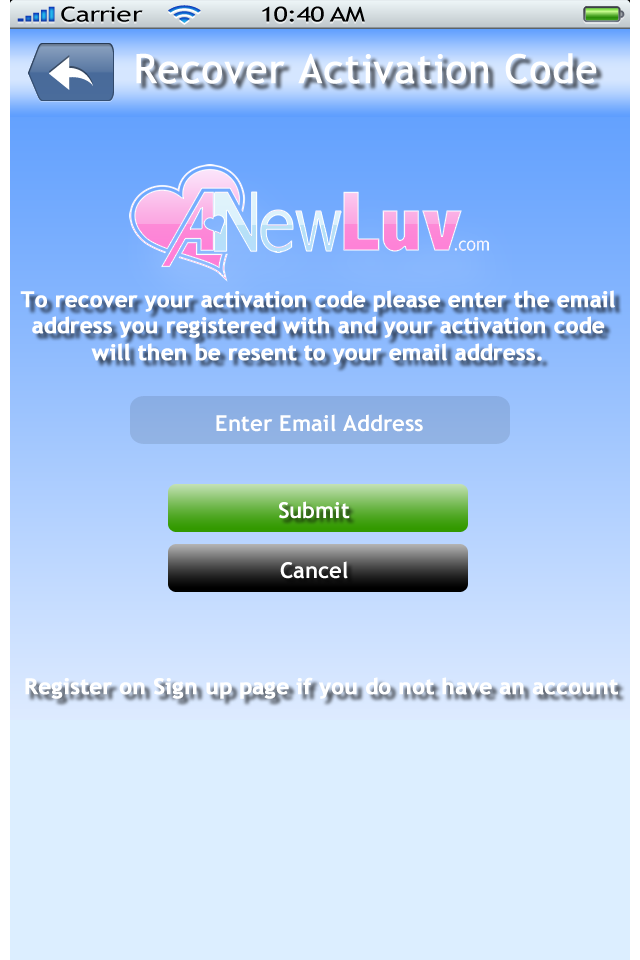
<style>
.page{position:relative;width:640px;height:960px;background:#dceeff}
.page>*{position:absolute;margin:0}
.t1{font:40px "TrebuchetMS";color:#ffffff;font-weight:bold}
.t2{font:22px/26.4px "TrebuchetMS-Bold";color:#ffffff;font-weight:bold}
.t3{font:22px "TrebuchetMS-Bold";color:#ffffff}
.t4{font:22px "TrebuchetMS-Bold";color:#ffffff;font-weight:bold}
</style>
<div class="page">
<p class="t1" style="left:136px;top:53px;width:461px;height:31px">Recover Activation Code</p>
<p class="t2" style="left:20px;top:290px;width:595px;height:75px;text-align:center">To recover your activation code please enter the email address you registered with and your activation code will then be resent to your email address.</p>
<p class="t3" style="left:216px;top:414px;width:207px;height:18px">Enter Email Address</p>
<p class="t3" style="left:279px;top:501px;width:71px;height:18px">Submit</p>
<p class="t3" style="left:280px;top:561px;width:68px;height:18px">Cancel</p>
<p class="t4" style="left:25px;top:677px;width:593px;height:22px">Register on Sign up page if you do not have an account</p>
</div>
